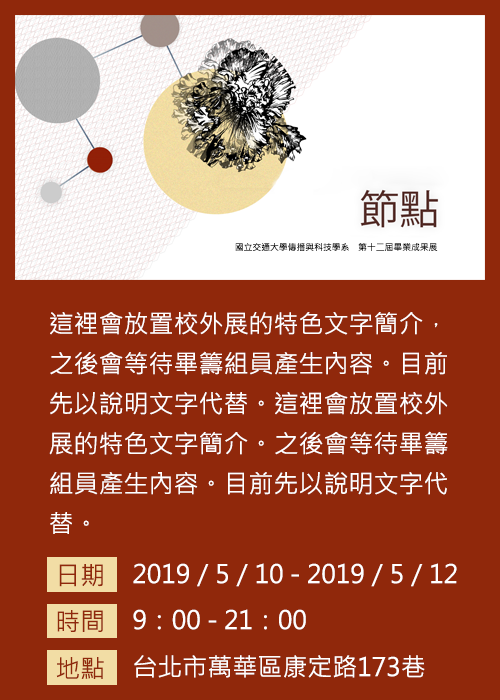
<style>
.page{position:relative;width:500px;height:700px;background:#90280b}
.page>*{position:absolute;margin:0}
.t1{font:8.8px "MicrosoftJhengHeiRegular";color:#000000}
.t2{font:25px/40px "MicrosoftJhengHeiRegular";color:#ffffff}
.t3{font:25px "MicrosoftJhengHeiRegular";color:#90280b}
.t4{font:25px "MicrosoftJhengHeiRegular";color:#ffffff}
</style>
<div class="page">
<p class="t1" style="left:235px;top:243px;width:203px;height:8px">國立交通大學傳播與科技學系　第十二屆畢業成果展</p>
<p class="t2" style="left:49px;top:312px;width:399px;height:222px">這裡會放置校外展的特色文字簡介，<br>之後會等待畢籌組員產生內容。目前<br>先以說明文字代替。這裡會放置校外<br>展的特色文字簡介。之後會等待畢籌<br>組員產生內容。目前先以說明文字代<br>替。</p>
<p class="t3" style="left:59px;top:564px;width:44px;height:23px">日期</p>
<p class="t4" style="left:133px;top:563px;width:324px;height:24px">2019／5／10 - 2019／5／12</p>
<p class="t3" style="left:57px;top:610px;width:46px;height:22px">時間</p>
<p class="t4" style="left:133px;top:609px;width:173px;height:21px">9：00 - 21：00</p>
<p class="t3" style="left:56px;top:657px;width:48px;height:22px">地點</p>
<p class="t4" style="left:134px;top:655px;width:291px;height:23px">台北市萬華區康定路173巷</p>
</div>
